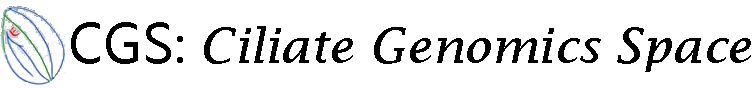
<style>
.page{position:relative;width:756px;height:88px;background:#ffffff}
.page>*{position:absolute;margin:0}
.t1{font:48px "LucidaFax-Italic";color:#000000}
.t2{font:53.3px "MicrosoftYaHei";color:#000000}
.t3{font:48px "MicrosoftYaHei";color:#000000}
</style>
<div class="page">
<p class="t1" style="left:71px;top:22px;width:680px;height:50px"><span class="t2">CGS</span><span class="t3">: </span>Ciliate Genomics Space</p>
</div>
